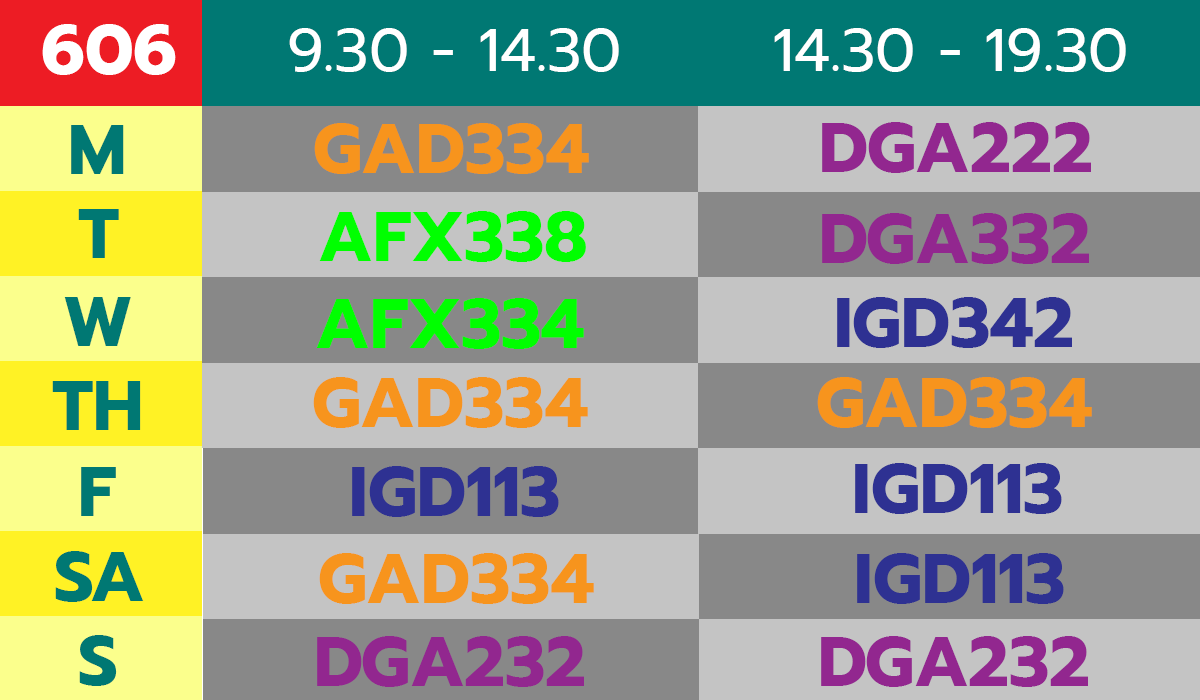
<style>
.page{position:relative;width:1200px;height:700px;background:#c4c4c4}
.page>*{position:absolute;margin:0}
.t1{font:70px "Prompt-Bold";color:#ffffff}
.t2{font:60px "Prompt-Regular";color:#ffffff}
.t3{font:70px "Prompt-Bold";color:#007873}
.t4{font:70px "Prompt-Bold";color:#f7941d}
.t5{font:70px "Prompt-Bold";color:#92278f}
.t6{font:70px "Prompt-Bold";color:#00ff00}
.t7{font:70px "Prompt-Bold";color:#2e3192}
</style>
<div class="page">
<p class="t1" style="left:42px;top:24px;width:134px;height:51px">606</p>
<p class="t2" style="left:289px;top:28px;width:330px;height:44px">9.30 - 14.30</p>
<p class="t2" style="left:774px;top:28px;width:352px;height:44px">14.30 - 19.30</p>
<p class="t3" style="left:71px;top:125px;width:53px;height:49px">M</p>
<p class="t4" style="left:314px;top:123px;width:275px;height:51px">GAD334</p>
<p class="t5" style="left:822px;top:122px;width:269px;height:51px">DGA222</p>
<p class="t3" style="left:78px;top:209px;width:41px;height:49px">T</p>
<p class="t6" style="left:319px;top:211px;width:267px;height:51px">AFX338</p>
<p class="t5" style="left:822px;top:213px;width:267px;height:51px">DGA332</p>
<p class="t3" style="left:64px;top:297px;width:67px;height:49px">W</p>
<p class="t6" style="left:316px;top:298px;width:268px;height:51px">AFX334</p>
<p class="t7" style="left:837px;top:297px;width:235px;height:51px">IGD342</p>
<p class="t4" style="left:313px;top:377px;width:275px;height:51px">GAD334</p>
<p class="t4" style="left:817px;top:377px;width:275px;height:51px">GAD334</p>
<p class="t3" style="left:52px;top:381px;width:89px;height:49px">TH</p>
<p class="t3" style="left:81px;top:467px;width:35px;height:49px">F</p>
<p class="t7" style="left:352px;top:466px;width:207px;height:51px">IGD113</p>
<p class="t7" style="left:855px;top:463px;width:207px;height:51px">IGD113</p>
<p class="t3" style="left:55px;top:551px;width:89px;height:51px">SA</p>
<p class="t4" style="left:319px;top:553px;width:275px;height:51px">GAD334</p>
<p class="t7" style="left:857px;top:553px;width:207px;height:51px">IGD113</p>
<p class="t3" style="left:79px;top:635px;width:38px;height:51px">S</p>
<p class="t5" style="left:317px;top:636px;width:267px;height:51px">DGA232</p>
<p class="t5" style="left:821px;top:636px;width:267px;height:51px">DGA232</p>
</div>
